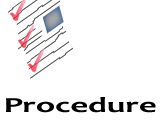
<style>
.page{position:relative;width:160px;height:120px;background:#ffffff}
.page>*{position:absolute;margin:0}
.t1{font:21.5px "Candara-Bold";color:#000000;scale:1.6 1}
</style>
<div class="page">
<p class="t1" style="left:6px;top:97px;width:150px;height:16px">Procedure</p>
</div>
